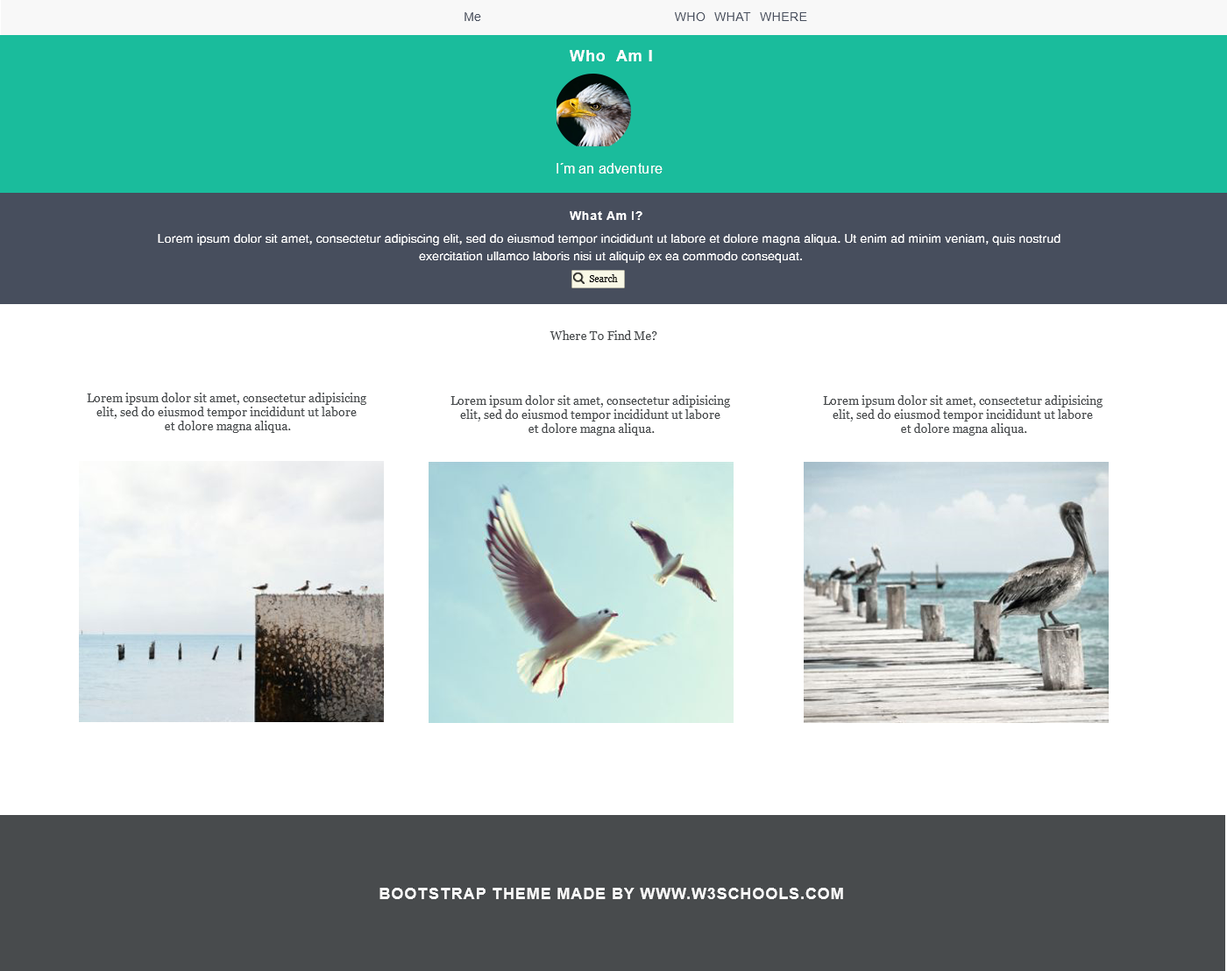
<style>
.page{position:relative;width:1227px;height:971px;background:#ffffff}
.page>*{position:absolute;margin:0}
.t1{font:12.3px "ArialMT";color:#474e5d}
.t2{font:12.3px "ArialMT";letter-spacing:0.05em;color:#474e5d;text-transform:uppercase}
.t3{font:15.8px "Arial-BoldMT";letter-spacing:0.05em;color:#ffffff}
.t4{font:14px "ArialMT";color:#ffffff}
.t5{font:12.3px "Arial-BoldMT";letter-spacing:0.05em;color:#ffffff}
.t6{font:12.3px/17.5px "Helvetica-Normal";color:#ffffff}
.t7{font:9.4px "Georgia";color:#000000}
.t8{font:12.3px "Georgia";color:#484b4d}
.t9{font:12.3px/14px "Georgia";color:#484b4d}
.t10{font:15.8px "Arial-BoldMT";letter-spacing:0.05em;color:#f8f8f8;text-transform:uppercase}
</style>
<div class="page">
<p class="t1" style="left:465px;top:12px;width:16px;height:9px">Me</p>
<p class="t2" style="left:675px;top:12px;width:133px;height:9px">Who  what  where</p>
<p class="t3" style="left:570px;top:50px;width:82px;height:11px">Who  Am I</p>
<p class="t4" style="left:557px;top:163px;width:106px;height:11px">I´m an adventure</p>
<p class="t5" style="left:570px;top:211px;width:73px;height:9px">What Am I?</p>
<p class="t6" style="left:158px;top:234px;width:903px;height:29px;text-align:center">Lorem ipsum dolor sit amet, consectetur adipiscing elit, sed do eiusmod tempor incididunt ut labore et dolore magna aliqua. Ut enim ad minim veniam, quis nostrud <br>exercitation ullamco laboris nisi ut aliquip ex ea commodo consequat.</p>
<p class="t7" style="left:589px;top:274px;width:29px;height:8px">Search</p>
<p class="t8" style="left:550px;top:331px;width:108px;height:9px">Where To Find Me?</p>
<p class="t9" style="left:87px;top:393px;width:279px;height:40px;text-align:center">Lorem ipsum dolor sit amet, consectetur adipisicing <br>elit, sed do eiusmod tempor incididunt ut labore <br>et dolore magna aliqua.</p>
<p class="t9" style="left:451px;top:395px;width:279px;height:41px;text-align:center">Lorem ipsum dolor sit amet, consectetur adipisicing <br>elit, sed do eiusmod tempor incididunt ut labore <br>et dolore magna aliqua.</p>
<p class="t9" style="left:823px;top:395px;width:280px;height:41px;text-align:center">Lorem ipsum dolor sit amet, consectetur adipisicing <br>elit, sed do eiusmod tempor incididunt ut labore <br>et dolore magna aliqua.</p>
<p class="t10" style="left:380px;top:888px;width:463px;height:12px">Bootstrap Theme Made By www.w3schools.com</p>
</div>
